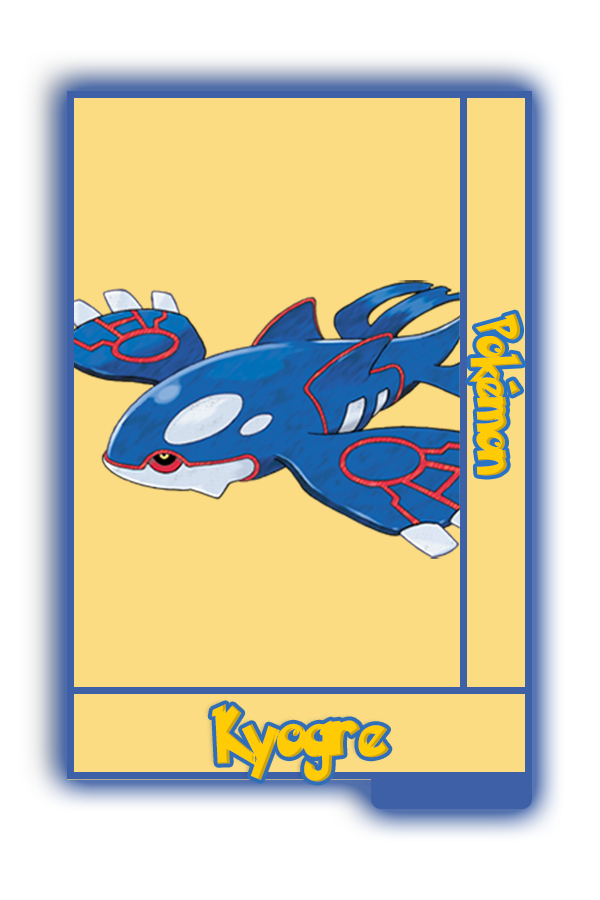
<style>
.page{position:relative;width:600px;height:900px;background:#fbdc83}
.page>*{position:absolute;margin:0}
.t1{font:48.8px "PokemonSolidNormal";color:#ffcb05;scale:0.8 1}
.t2{font:56.6px "PokemonSolidNormal";color:#ffcb05;scale:0.92 1}
</style>
<div class="page">
<p class="t1" style="left:469px;top:313px;width:54px;height:163px;rotate:90deg">Pokémon</p>
<p class="t2" style="left:211px;top:704px;width:178px;height:78px">Kyogre</p>
</div>
